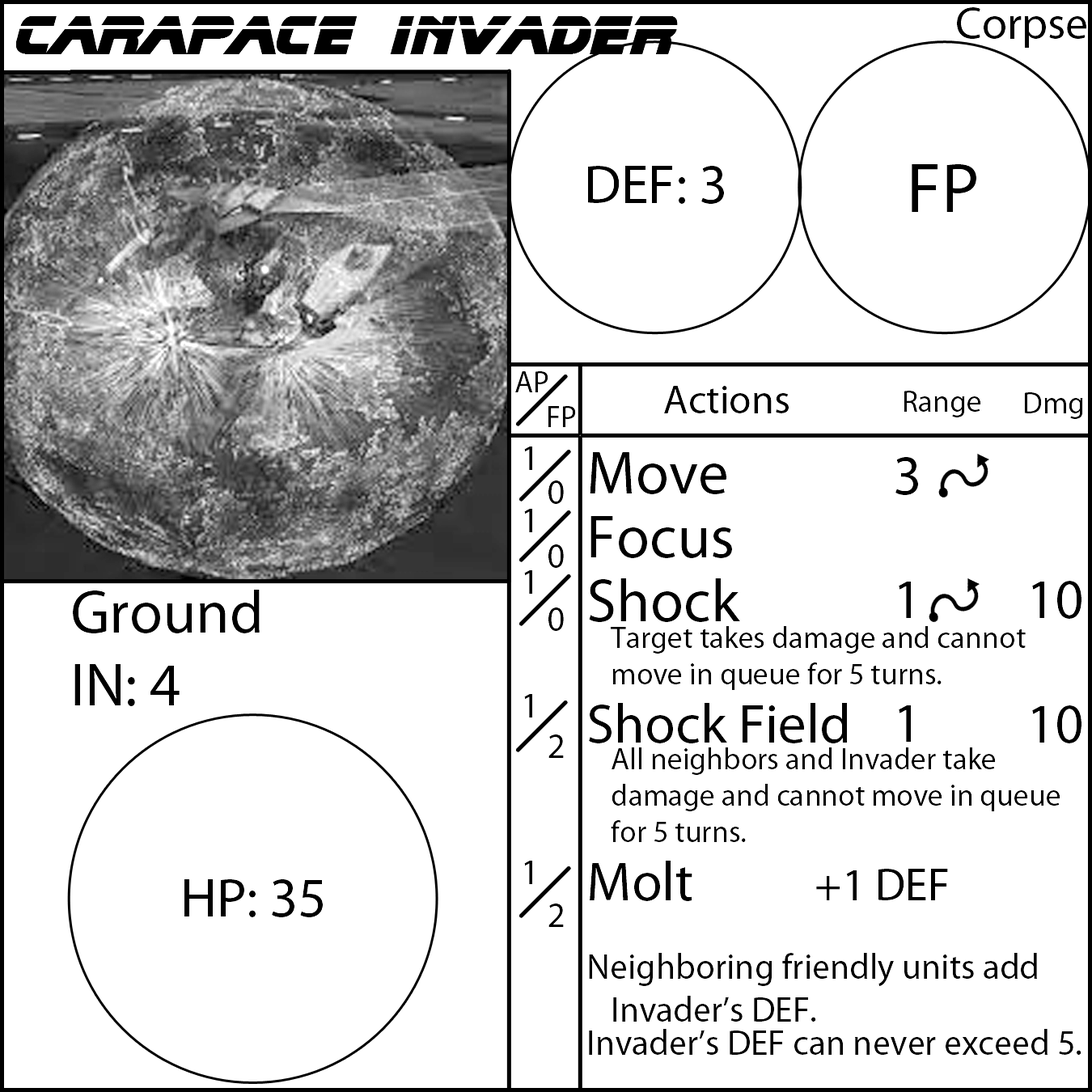
<style>
.page{position:relative;width:1092px;height:1092px;background:#ffffff}
.page>*{position:absolute;margin:0}
.t1{font:55.6px "BladeRunnerMovieFont";color:#000000}
.t2{font:55.6px "MyriadPro-Regular";color:#000000}
.t3{font:70.8px "MyriadPro-Regular";color:#000000}
.t4{font:30.3px "MyriadPro-Regular";color:#000000}
.t5{font:40.4px "MyriadPro-Regular";color:#000000}
.t6{font:35.4px "MyriadPro-Regular";color:#000000}
.t7{font:60.7px "MyriadPro-Regular";color:#000000}
.t8{font:45.5px "MyriadPro-Regular";color:#000000}
</style>
<div class="page">
<p class="t1" style="left:15px;top:16px;width:663px;height:38px">Carapace Invader</p>
<p class="t2" style="left:588px;top:166px;width:136px;height:38px">DEF: 3</p>
<p class="t3" style="left:912px;top:164px;width:64px;height:48px">FP</p>
<p class="t4" style="left:515px;top:371px;width:33px;height:21px">AP</p>
<p class="t5" style="left:664px;top:386px;width:125px;height:27px">Actions</p>
<p class="t4" style="left:904px;top:391px;width:77px;height:26px">Range</p>
<p class="t4" style="left:1024px;top:392px;width:59px;height:27px">Dmg</p>
<p class="t4" style="left:548px;top:406px;width:28px;height:21px">FP</p>
<p class="t6" style="left:524px;top:447px;width:8px;height:437px">1<br>1<br>1<br><br>1<br> <br>1</p>
<p class="t6" style="left:589px;top:452px;width:492px;height:603px"><span class="t7">Move<br>Focus<br>Shock<br></span><span class="t4"> Target takes damage and cannot     move in queue for 5 turns.<br></span><span class="t2">Shock Field<br></span><span class="t4"> All neighbors and Invader take      damage and cannot move in queue    for 5 turns.<br></span><span class="t2">Molt     </span><span class="t8">+1 DEF <br><br></span>Neighboring friendly units add     Invader’s DEF.<br>Invader’s DEF can never exceed 5.<br><br><br>Neighboring friendly units add Carapace Invader’s DEF.<br>Carapace Invader’s DEF cannot exceed 5.</p>
<p class="t2" style="left:895px;top:457px;width:23px;height:285px;text-align:center">3<br><br>1<br><br>1</p>
<p class="t6" style="left:548px;top:480px;width:16px;height:447px">0<br>0<br>0<br><br>2<br> <br>2</p>
<p class="t2" style="left:1032px;top:581px;width:49px;height:162px;text-align:center">10<br><br>10</p>
<p class="t7" style="left:73px;top:590px;width:187px;height:116px">Ground<br>IN: 4</p>
<p class="t2" style="left:184px;top:879px;width:139px;height:38px">HP: 35</p>
</div>
